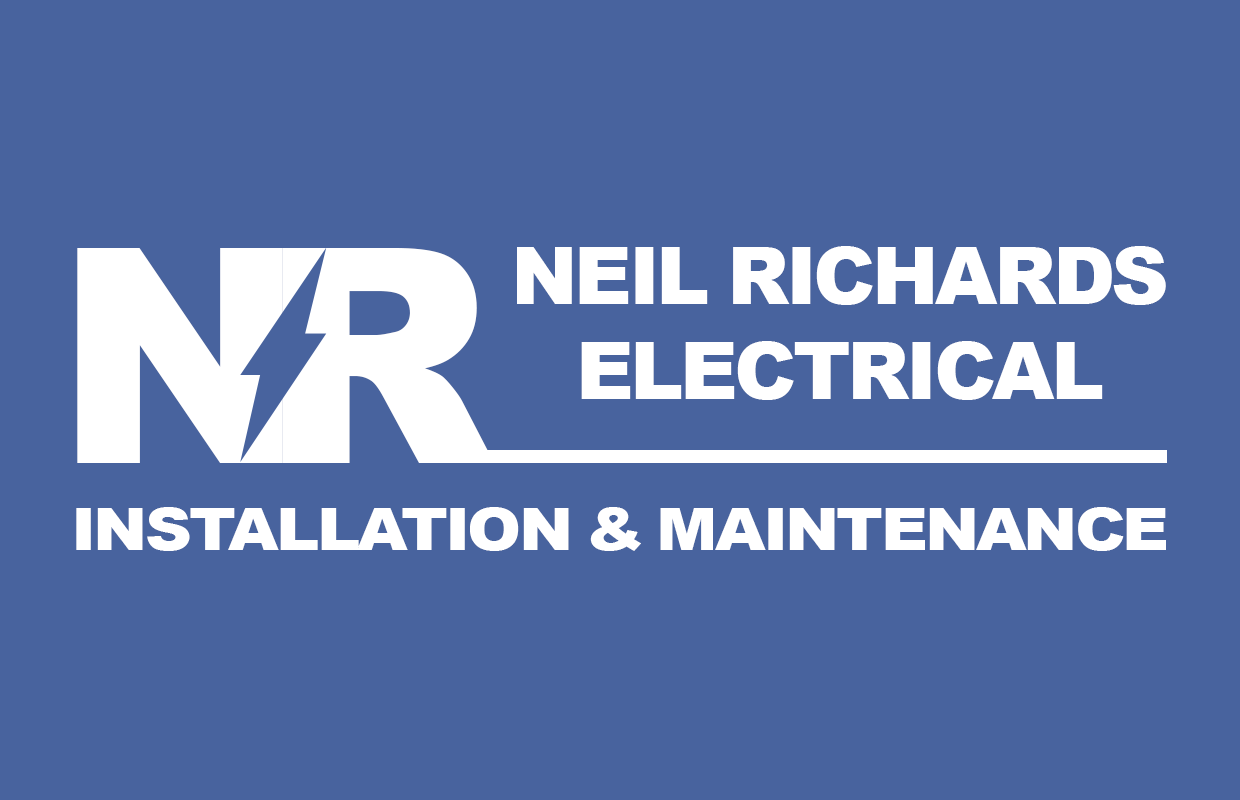
<style>
.page{position:relative;width:1240px;height:800px;background:#48639e}
.page>*{position:absolute;margin:0}
.t1{font:79px "Arial-Black";letter-spacing:-0.075em;color:#ffffff;text-transform:uppercase}
.t2{font:300px "Arial-Black";color:#ffffff;text-transform:uppercase}
.t3{font:58.3px "Arial-Black";letter-spacing:-0.075em;color:#ffffff;text-transform:uppercase;scale:1.11 1}
</style>
<div class="page">
<p class="t1" style="left:517px;top:246px;width:649px;height:154px;text-align:center">Neil richards<br>electrical</p>
<p class="t2" style="left:77px;top:248px;width:206px;height:215px">N</p>
<p class="t2" style="left:282px;top:248px;width:213px;height:215px">R</p>
<p class="t3" style="left:76px;top:507px;width:1090px;height:44px">installation &amp; maintenance</p>
</div>
